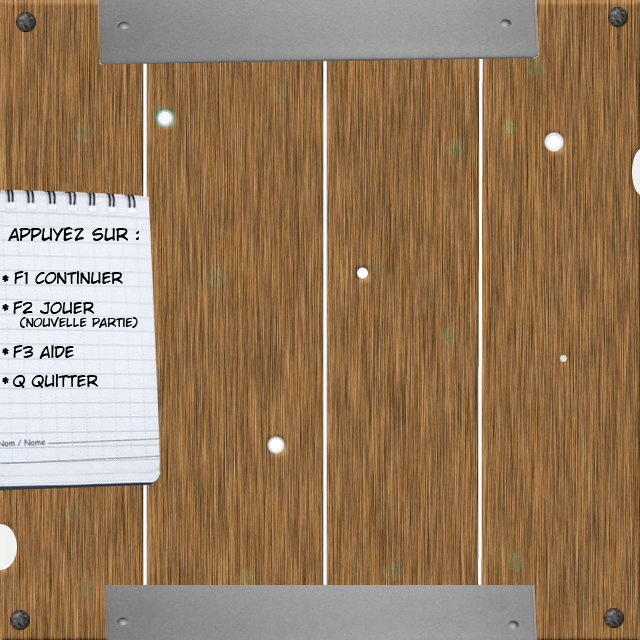
<style>
.page{position:relative;width:640px;height:640px}
.page>*{position:absolute;margin:0}
.t1{font:17.3px "WildjessNormal";color:#000000}
.t2{font:16px "WildjessNormal";color:#000000}
.t3{font:12px "WildjessNormal";color:#000000}
</style>
<div class="page">
<p class="t1" style="left:8px;top:227px;width:131px;height:14px">Appuyez sur :</p>
<p class="t2" style="left:2px;top:275px;width:7px;height:7px">*</p>
<p class="t2" style="left:14px;top:271px;width:109px;height:13px">F1 continuer</p>
<p class="t2" style="left:2px;top:304px;width:7px;height:7px">*</p>
<p class="t2" style="left:13px;top:301px;width:82px;height:13px">F2 jouer</p>
<p class="t3" style="left:20px;top:317px;width:118px;height:11px">(nouvelle partie)</p>
<p class="t2" style="left:2px;top:348px;width:7px;height:7px">*</p>
<p class="t2" style="left:13px;top:345px;width:61px;height:14px">F3 aide</p>
<p class="t2" style="left:2px;top:377px;width:7px;height:7px">*</p>
<p class="t2" style="left:13px;top:374px;width:85px;height:14px">Q Quitter</p>
</div>
